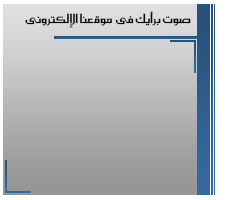
<style>
.page{position:relative;width:240px;height:200px}
.page>*{position:absolute;margin:0}
.t1{font:15px "SC_KHALID";color:#070707}
</style>
<div class="page">
<p class="t1" style="left:25px;top:11px;width:166px;height:17px">صوت برأيك فى  موقعنا الإلكترونى</p>
</div>
